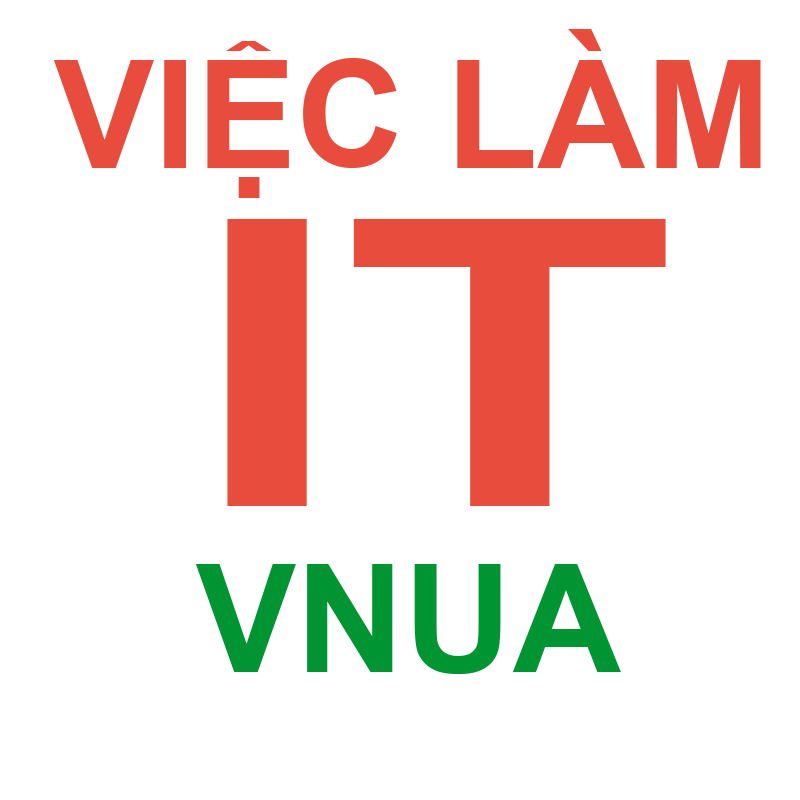
<style>
.page{position:relative;width:800px;height:800px;background:#ffffff}
.page>*{position:absolute;margin:0}
.t1{font:150px "Arial-BoldMT";color:#e74c3c}
.t2{font:400.2px "Arial-BoldMT";color:#e74c3c;scale:1.37 1}
.t3{font:150px "Arial-BoldMT";color:#009432}
</style>
<div class="page">
<p class="t1" style="left:53px;top:28px;width:708px;height:170px">VIỆC LÀM</p>
<p class="t2" style="left:227px;top:218px;width:439px;height:288px">IT</p>
<p class="t3" style="left:195px;top:564px;width:426px;height:110px">VNUA</p>
</div>
